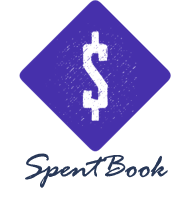
<style>
.page{position:relative;width:190px;height:200px;background:#ffffff}
.page>*{position:absolute;margin:0}
.t1{font:36px "RageItalic";color:#283858}
</style>
<div class="page">
<p class="t1" style="left:25px;top:153px;width:143px;height:35px">SpentBook</p>
</div>
